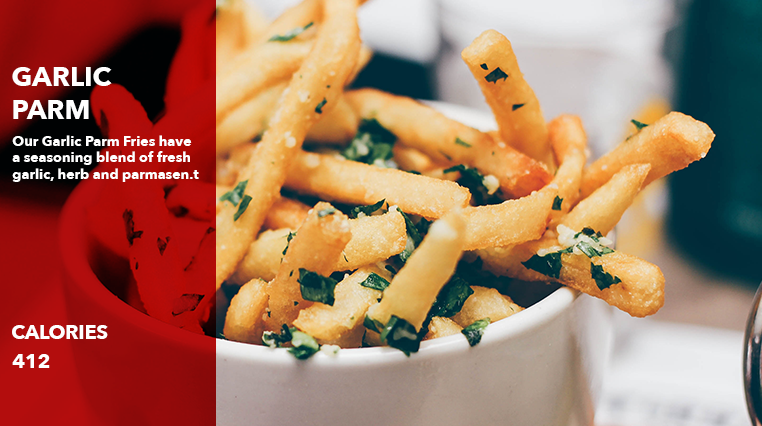
<style>
.page{position:relative;width:762px;height:426px}
.page>*{position:absolute;margin:0}
.t1{font:27.1px "AvenirNext-Bold";color:#ffffff}
.t2{font:14px "AvenirNext-Bold";color:#ffffff}
.t3{font:19.5px "AvenirNext-Bold";color:#ffffff}
</style>
<div class="page">
<p class="t1" style="left:12px;top:67px;width:100px;height:52px">GARLIC<br>PARM</p>
<p class="t2" style="left:12px;top:135px;width:187px;height:47px">Our Garlic Parm Fries have<br>a seasoning blend of fresh<br>garlic, herb and parmasen.t</p>
<p class="t3" style="left:12px;top:325px;width:96px;height:14px">CALORIES</p>
<p class="t3" style="left:12px;top:354px;width:38px;height:14px">412</p>
</div>
